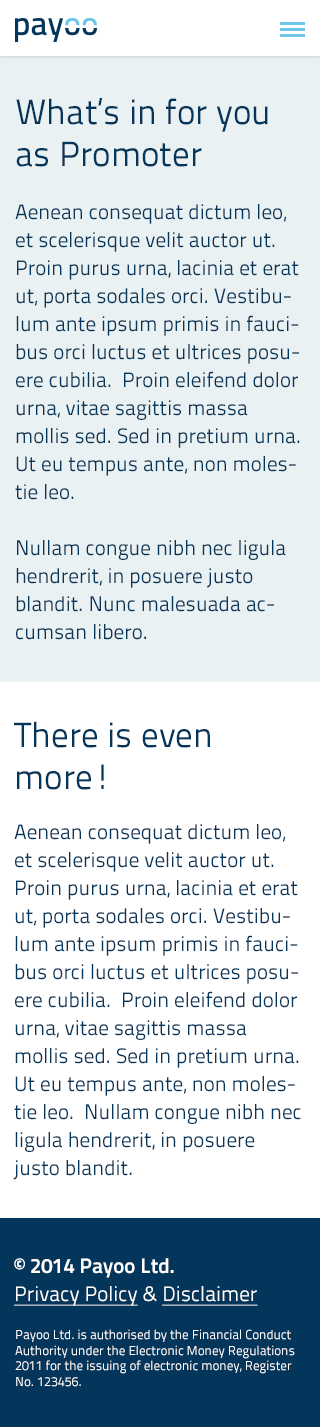
<style>
.page{position:relative;width:320px;height:1427px;background:#eaf1f3}
.page>*{position:absolute;margin:0}
.t1{font:35px "TitilliumText25L-400wt";color:#04355a}
.t2{font:21px/28px "TitilliumText25L-400wt";color:#04355a}
.t3{font:21px/28px "TitilliumText25L-800wt";color:#ffffff}
.t4{font:21px/28px "TitilliumText25L-400wt";color:#ffffff;text-decoration:underline}
.t5{font:21px/28px "TitilliumText25L-400wt";color:#ffffff}
.t6{font:13px "TitilliumText25L-400wt";color:#ffffff}
</style>
<div class="page">
<p class="t1" style="left:16px;top:98px;width:252px;height:69px">What’s in for you <br>as Promoter</p>
<p class="t2" style="left:15px;top:204px;width:285px;height:436px">Aenean consequat dictum leo, et scelerisque velit auctor ut. Proin purus urna, lacinia et erat ut, porta sodales orci. Vestibulum ante ipsum primis in faucibus orci luctus et ultrices posuere cubilia.  Proin eleifend dolor urna, vitae sagittis massa mollis sed. Sed in pretium urna. Ut eu tempus ante, non molestie leo. <br><br>Nullam congue nibh nec ligula hendrerit, in posuere justo blandit. Nunc malesuada accumsan libero.</p>
<p class="t1" style="left:14px;top:721px;width:196px;height:69px">There is even <br>more!</p>
<p class="t2" style="left:13px;top:824px;width:288px;height:356px">Aenean consequat dictum leo, et scelerisque velit auctor ut. Proin purus urna, lacinia et erat ut, porta sodales orci. Vestibulum ante ipsum primis in faucibus orci luctus et ultrices posuere cubilia.  Proin eleifend dolor urna, vitae sagittis massa mollis sed. Sed in pretium urna. Ut eu tempus ante, non molestie leo.  Nullam congue nibh nec ligula hendrerit, in posuere justo blandit.</p>
<p class="t3" style="left:14px;top:1258px;width:244px;height:48px">© 2014 Payoo Ltd.<br><span class="t4">Privacy Policy</span><span class="t5"> &amp; </span><span class="t4">Disclaimer</span></p>
<p class="t6" style="left:15px;top:1329px;width:280px;height:58px">Payoo Ltd. is authorised by the Financial Conduct Authority under the Electronic Money Regulations 2011 for the issuing of electronic money, Register No. 123456.</p>
</div>
